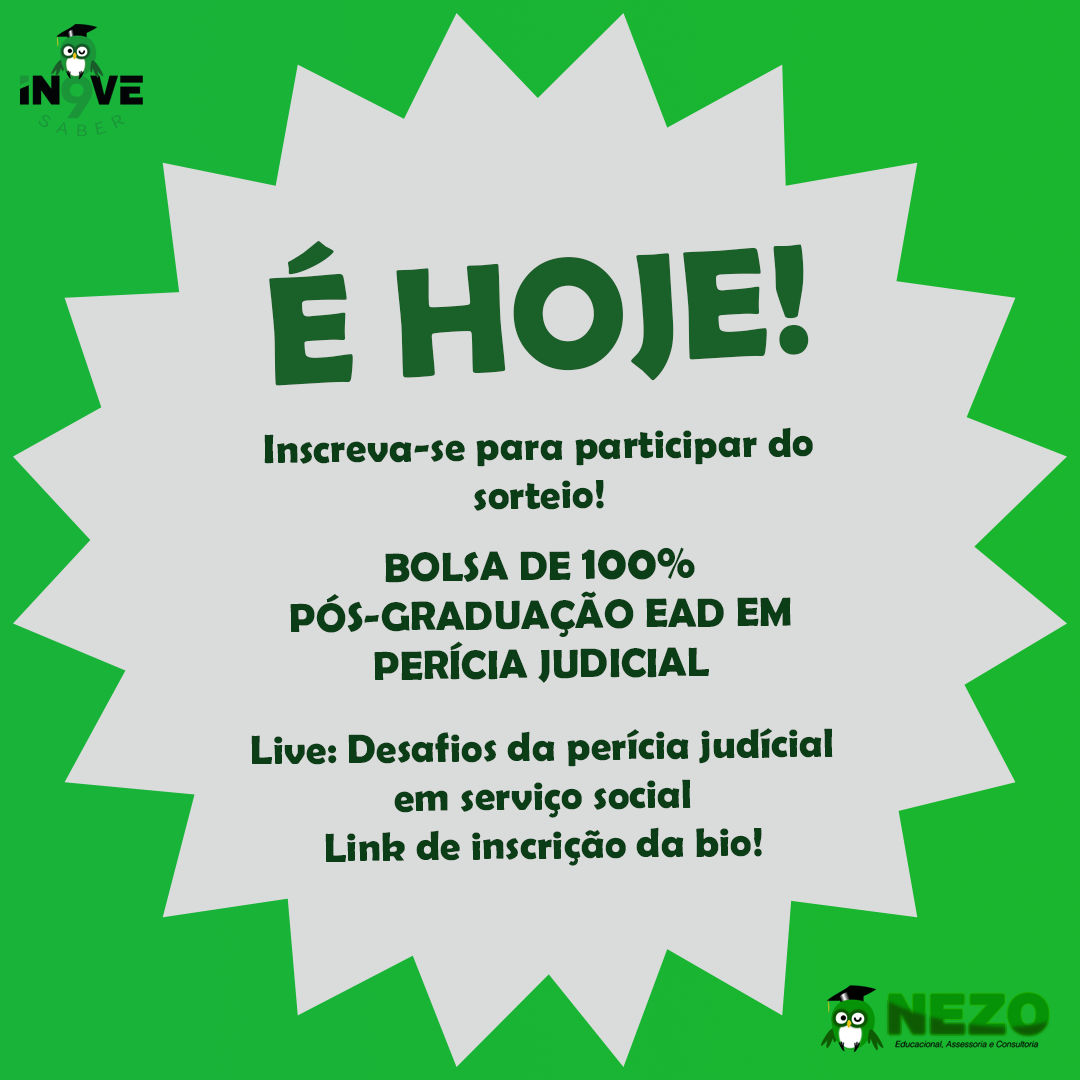
<style>
.page{position:relative;width:1080px;height:1080px;background:#dadcdb}
.page>*{position:absolute;margin:0}
.t1{font:156.8px "BerlinSansFBDemi-Bold";color:#1a6029}
.t2{font:40.9px "BerlinSansFBDemi-Bold";color:#0b3d16}
.t3{font:40.9px/70.9px "BerlinSansFBDemi-Bold";color:#0b3d16}
.t4{font:47.9px/70.9px "BerlinSansFBDemi-Bold";color:#0b3d16}
.t5{font:40.9px/82.5px "BerlinSansFBDemi-Bold";color:#0b3d16}
</style>
<div class="page">
<p class="t1" style="left:269px;top:240px;width:540px;height:146px;rotate:-4deg">É HOJE!</p>
<p class="t2" style="left:251px;top:427px;width:582px;height:439px;text-align:center;rotate:-1deg">Inscreva-se para participar do sorteio!<br><span class="t3">BOLSA DE </span><span class="t4">100%                       </span>PÓS-GRADUAÇÃO EAD EM <br>PERÍCIA JUDICIAL<br><span class="t5">Live: Desafios da perícia judícial </span>em serviço social<br>Link de inscrição da bio!</p>
</div>
